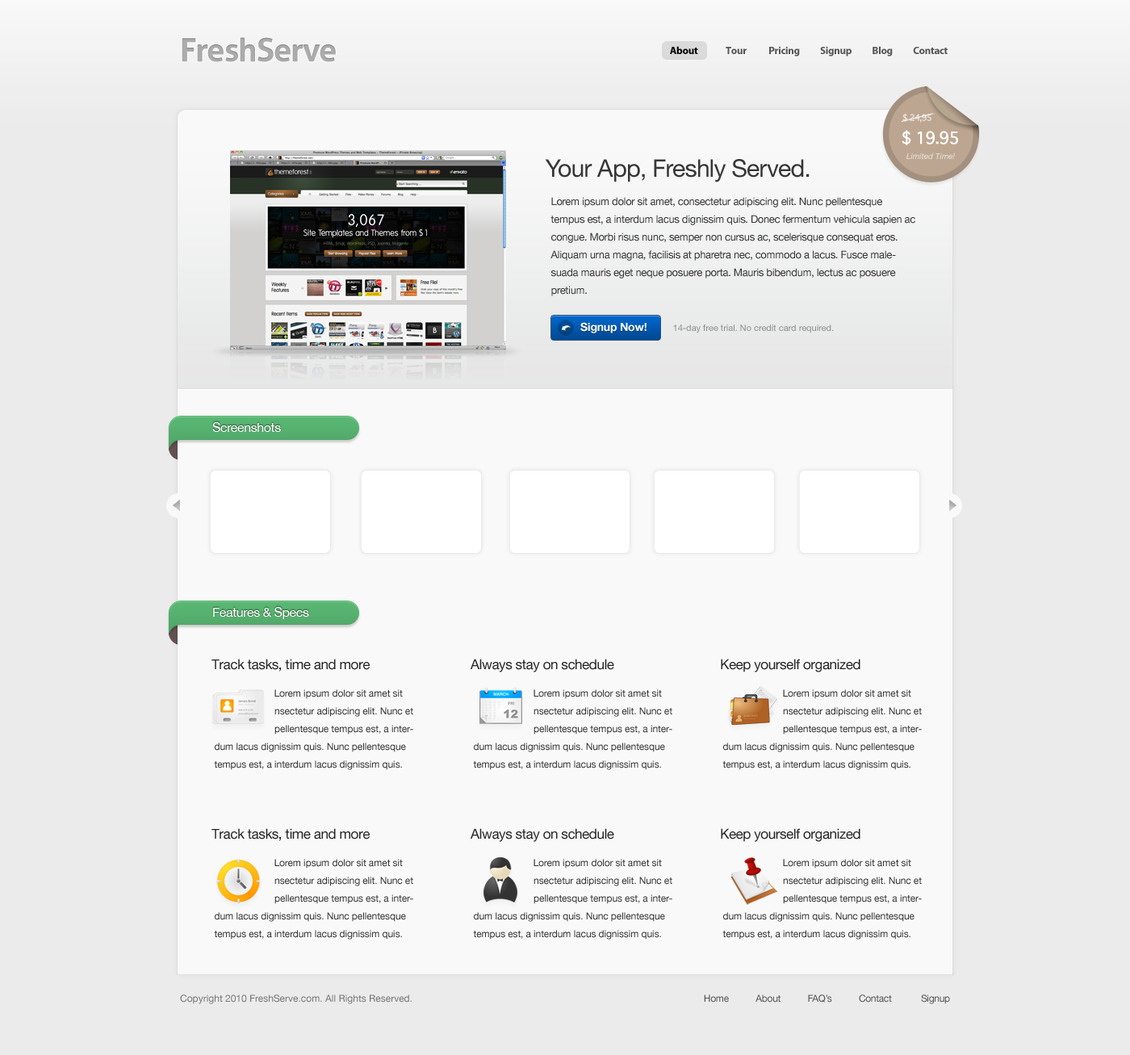
<style>
.page{position:relative;width:1130px;height:1055px;background:#ebebeb}
.page>*{position:absolute;margin:0}
.t1{font:32.3px "Aller-Bold";letter-spacing:-0.025em;color:#acacac}
.t2{font:10.5px "MyriadPro-Bold";letter-spacing:-0.025em;color:#555555}
.t3{font:10.5px "MyriadPro-Bold";letter-spacing:-0.025em;color:#000000}
.t4{font:8.5px "Geneva";letter-spacing:-0.075em;color:#ebe4de}
.t5{font:15.7px "Geneva";letter-spacing:-0.075em;color:#ffffff;font-weight:bold}
.t6{font:24.2px "HelveticaNeue";letter-spacing:-0.025em;color:#363636}
.t7{font:8.1px "HelveticaNeue-Italic";color:#ebe4de}
.t8{font:10.5px/17.8px "HelveticaNeue";letter-spacing:-0.025em;color:#363636}
.t9{font:11.3px "HelveticaNeue-Bold";letter-spacing:-0.015em;color:#ffffff}
.t10{font:8.9px "HelveticaNeue";color:#8c8c8c}
.t11{font:12.9px "HelveticaNeue";letter-spacing:-0.025em;color:#ffffff}
.t12{font:13.7px "HelveticaNeue";letter-spacing:-0.025em;color:#252525}
.t13{font:9.7px/17.8px "HelveticaNeue";letter-spacing:-0.01em;color:#363636}
.t14{font:9.7px "HelveticaNeue";color:#757575}
.t15{font:9.7px "HelveticaNeue";letter-spacing:-0.025em;color:#555555}
</style>
<div class="page">
<p class="t1" style="left:182px;top:37px;width:154px;height:25px">FreshServe</p>
<p class="t2" style="left:670px;top:46px;width:278px;height:11px"><span class="t3">About               </span>Tour            Pricing           Signup           Blog           Contact</p>
<p class="t4" style="left:903px;top:113px;width:29px;height:10px">$ 24,95</p>
<p class="t5" style="left:902px;top:130px;width:56px;height:15px">$ 19.95</p>
<p class="t6" style="left:545px;top:159px;width:265px;height:23px">Your App, Freshly Served.</p>
<p class="t7" style="left:907px;top:153px;width:48px;height:6px">Limited Time!</p>
<p class="t8" style="left:551px;top:197px;width:364px;height:99px">Lorem ipsum dolor sit amet, consectetur adipiscing elit. Nunc pellentesque tempus est, a interdum lacus dignissim quis. Donec fermentum vehicula sapien ac congue. Morbi risus nunc, semper non cursus ac, scelerisque consequat eros. Aliquam urna magna, facilisis at pharetra nec, commodo a lacus. Fusce malesuada mauris eget neque posuere porta. Mauris bibendum, lectus ac posuere pretium.</p>
<p class="t9" style="left:580px;top:322px;width:67px;height:11px">Signup Now!</p>
<p class="t10" style="left:673px;top:325px;width:161px;height:8px">14-day free trial. No credit card required.</p>
<p class="t11" style="left:212px;top:422px;width:69px;height:10px">Screenshots</p>
<p class="t11" style="left:213px;top:607px;width:96px;height:12px">Features &amp; Specs</p>
<p class="t12" style="left:212px;top:659px;width:158px;height:13px">Track tasks, time and more</p>
<p class="t12" style="left:471px;top:659px;width:143px;height:13px">Always stay on schedule</p>
<p class="t12" style="left:721px;top:659px;width:140px;height:13px">Keep yourself organized</p>
<p class="t13" style="left:214px;top:689px;width:199px;height:81px">Lorem ipsum dolor sit amet sit<br>             nsectetur adipiscing elit. Nunc et<br>             pellentesque tempus est, a interdum lacus dignissim quis. Nunc pellentesque tempus est, a interdum lacus dignissim quis.</p>
<p class="t13" style="left:473px;top:689px;width:199px;height:81px">Lorem ipsum dolor sit amet sit<br>             nsectetur adipiscing elit. Nunc et<br>             pellentesque tempus est, a interdum lacus dignissim quis. Nunc pellentesque tempus est, a interdum lacus dignissim quis.</p>
<p class="t13" style="left:723px;top:689px;width:199px;height:81px">Lorem ipsum dolor sit amet sit<br>             nsectetur adipiscing elit. Nunc et<br>             pellentesque tempus est, a interdum lacus dignissim quis. Nunc pellentesque tempus est, a interdum lacus dignissim quis.</p>
<p class="t12" style="left:212px;top:828px;width:158px;height:13px">Track tasks, time and more</p>
<p class="t12" style="left:471px;top:828px;width:143px;height:14px">Always stay on schedule</p>
<p class="t12" style="left:721px;top:828px;width:140px;height:14px">Keep yourself organized</p>
<p class="t13" style="left:214px;top:859px;width:199px;height:81px">Lorem ipsum dolor sit amet sit<br>             nsectetur adipiscing elit. Nunc et<br>             pellentesque tempus est, a interdum lacus dignissim quis. Nunc pellentesque tempus est, a interdum lacus dignissim quis.</p>
<p class="t13" style="left:473px;top:859px;width:199px;height:81px">Lorem ipsum dolor sit amet sit<br>             nsectetur adipiscing elit. Nunc et<br>             pellentesque tempus est, a interdum lacus dignissim quis. Nunc pellentesque tempus est, a interdum lacus dignissim quis.</p>
<p class="t13" style="left:723px;top:859px;width:199px;height:81px">Lorem ipsum dolor sit amet sit<br>             nsectetur adipiscing elit. Nunc et<br>             pellentesque tempus est, a interdum lacus dignissim quis. Nunc pellentesque tempus est, a interdum lacus dignissim quis.</p>
<p class="t14" style="left:180px;top:995px;width:232px;height:9px">Copyright 2010 FreshServe.com. All Rights Reserved.</p>
<p class="t15" style="left:704px;top:995px;width:246px;height:9px">Home           About           FAQ’s           Contact            Signup</p>
</div>
